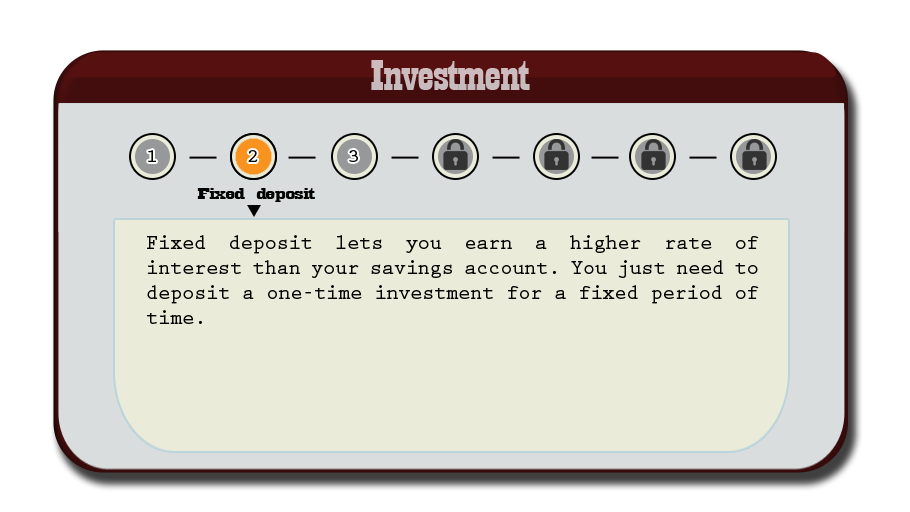
<style>
.page{position:relative;width:910px;height:512px;background:#eaebd8}
.page>*{position:absolute;margin:0}
.t1{font:44.6px "Playbill";letter-spacing:-0.025em;color:#c8bbbe;scale:1.61 1}
.t2{font:18.8px "PrestigeEliteStd-Bd";letter-spacing:-0.025em;color:#020201;scale:1.18 1}
.t3{font:17.3px "Playbill";letter-spacing:-0.025em;color:#020201;scale:2.47 1}
.t4{font:20.8px "PrestigeEliteStd-Bd";letter-spacing:-0.025em;color:#020201}
</style>
<div class="page">
<p class="t1" style="left:371px;top:60px;width:159px;height:30px">Investment</p>
<p class="t2" style="left:148px;top:150px;width:8px;height:12px">1</p>
<p class="t2" style="left:248px;top:150px;width:10px;height:12px">2</p>
<p class="t2" style="left:349px;top:150px;width:9px;height:12px">3</p>
<p class="t3" style="left:197px;top:188px;width:118px;height:14px">Fixed deposit</p>
<p class="t4" style="left:147px;top:235px;width:612px;height:89px;text-align:justify">Fixed deposit lets you earn a higher rate of interest than your savings account. You just need to deposit a one-time investment for a fixed period of time.</p>
</div>
